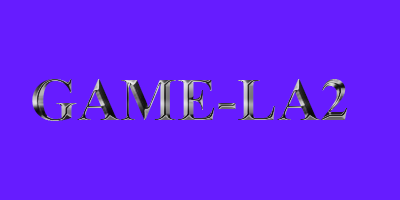
<style>
.page{position:relative;width:400px;height:200px;background:#661cff}
.page>*{position:absolute;margin:0}
.t1{font:60px "TimesNewRomanPS-BoldMT";text-transform:uppercase}
</style>
<div class="page">
<p class="t1" style="left:32px;top:79px;width:316px;height:42px">game-la2</p>
</div>
